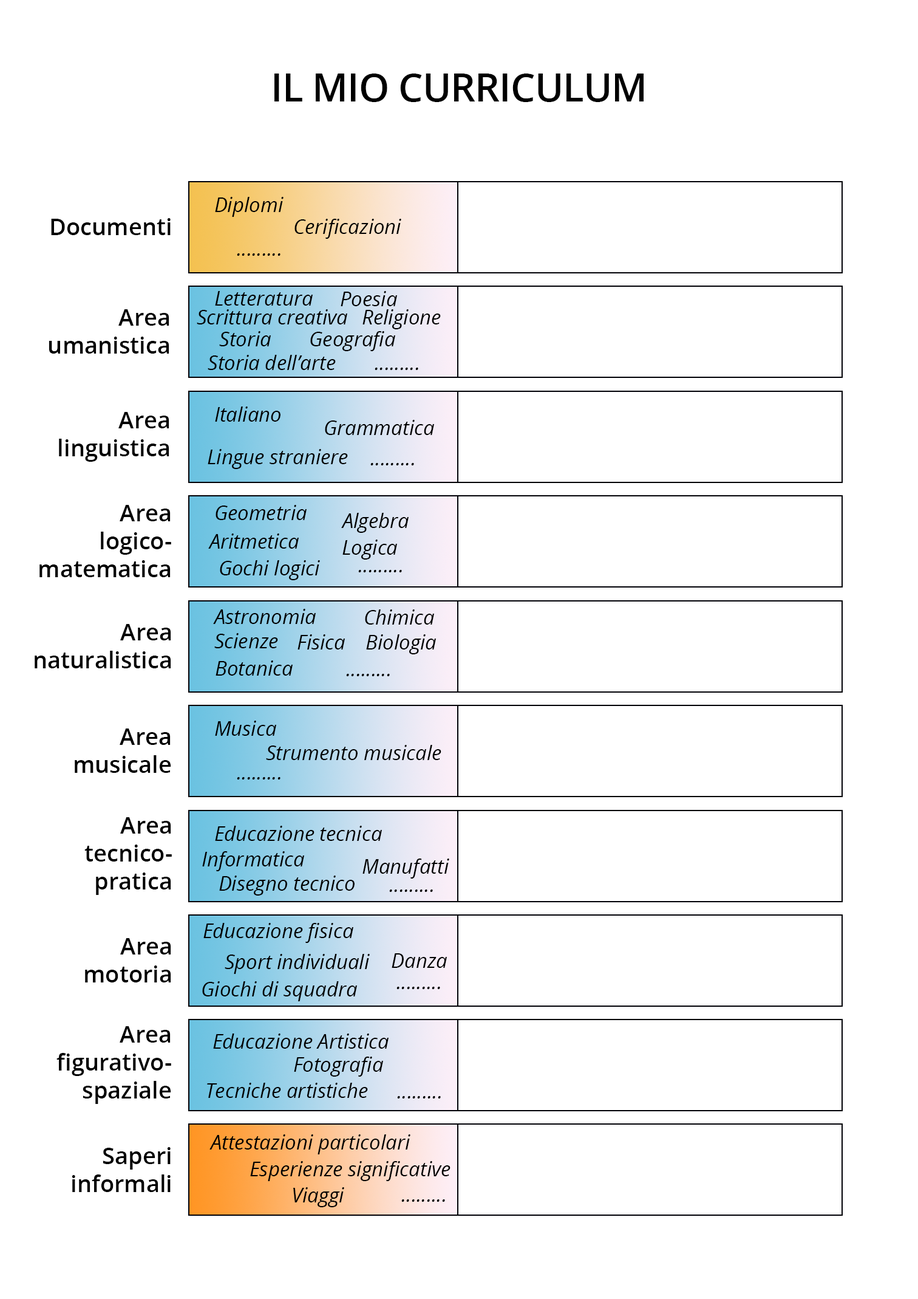
<style>
.page{position:relative;width:918px;height:1299px;background:#ffffff}
.page>*{position:absolute;margin:0}
.t1{font:38.6px "OpenSans-Semibold";letter-spacing:-0.01em;color:#000000}
.t2{font:20.1px "OpenSans-Italic";color:#000000}
.t3{font:23.1px "OpenSans-Semibold";color:#000000}
</style>
<div class="page">
<p class="t1" style="left:275px;top:73px;width:369px;height:29px">IL MIO CURRICULUM</p>
<p class="t2" style="left:215px;top:197px;width:69px;height:20px">Diplomi</p>
<p class="t3" style="left:51px;top:218px;width:120px;height:17px">Documenti</p>
<p class="t2" style="left:295px;top:219px;width:106px;height:20px">Cerificazioni</p>
<p class="t2" style="left:237px;top:253px;width:44px;height:3px">.........</p>
<p class="t2" style="left:215px;top:291px;width:98px;height:14px">Letteratura</p>
<p class="t2" style="left:341px;top:291px;width:56px;height:15px">Poesia</p>
<p class="t3" style="left:49px;top:309px;width:120px;height:44px;text-align:right">Area<br>umanistica</p>
<p class="t2" style="left:197px;top:309px;width:150px;height:15px">Scrittura creativa</p>
<p class="t2" style="left:363px;top:309px;width:78px;height:20px">Religione</p>
<p class="t2" style="left:219px;top:331px;width:52px;height:15px">Storia</p>
<p class="t2" style="left:310px;top:331px;width:85px;height:20px">Geografia</p>
<p class="t2" style="left:208px;top:355px;width:128px;height:15px">Storia dell’arte</p>
<p class="t2" style="left:375px;top:367px;width:43px;height:3px">.........</p>
<p class="t3" style="left:59px;top:412px;width:110px;height:50px;text-align:right">Area<br>linguistica</p>
<p class="t2" style="left:215px;top:406px;width:66px;height:15px">Italiano</p>
<p class="t2" style="left:325px;top:420px;width:109px;height:15px">Grammatica</p>
<p class="t2" style="left:208px;top:449px;width:140px;height:20px">Lingue straniere</p>
<p class="t2" style="left:370px;top:463px;width:44px;height:2px">.........</p>
<p class="t3" style="left:39px;top:505px;width:132px;height:72px;text-align:right">Area<br>logico-<br>matematica</p>
<p class="t2" style="left:216px;top:505px;width:91px;height:15px">Geometria</p>
<p class="t2" style="left:341px;top:513px;width:68px;height:20px">Algebra</p>
<p class="t2" style="left:208px;top:533px;width:91px;height:15px">Aritmetica</p>
<p class="t2" style="left:343px;top:539px;width:54px;height:20px">Logica</p>
<p class="t2" style="left:220px;top:560px;width:100px;height:20px">Gochi logici</p>
<p class="t2" style="left:358px;top:570px;width:44px;height:2px">.........</p>
<p class="t2" style="left:213px;top:609px;width:103px;height:15px">Astronomia</p>
<p class="t2" style="left:365px;top:609px;width:69px;height:15px">Chimica</p>
<p class="t3" style="left:35px;top:624px;width:136px;height:44px;text-align:right">Area<br>naturalistica</p>
<p class="t2" style="left:214px;top:633px;width:64px;height:15px">Scienze</p>
<p class="t2" style="left:298px;top:634px;width:47px;height:15px">Fisica</p>
<p class="t2" style="left:366px;top:634px;width:70px;height:20px">Biologia</p>
<p class="t2" style="left:216px;top:660px;width:77px;height:15px">Botanica</p>
<p class="t2" style="left:346px;top:674px;width:44px;height:2px">.........</p>
<p class="t2" style="left:215px;top:720px;width:61px;height:15px">Musica</p>
<p class="t3" style="left:75px;top:728px;width:96px;height:45px;text-align:right">Area<br>musicale</p>
<p class="t2" style="left:266px;top:745px;width:176px;height:15px">Strumento musicale</p>
<p class="t2" style="left:237px;top:777px;width:44px;height:2px">.........</p>
<p class="t3" style="left:84px;top:817px;width:88px;height:78px;text-align:right">Area<br>tecnico-<br>pratica</p>
<p class="t2" style="left:215px;top:825px;width:167px;height:16px">Educazione tecnica</p>
<p class="t2" style="left:202px;top:851px;width:102px;height:20px">Informatica</p>
<p class="t2" style="left:363px;top:858px;width:86px;height:20px">Manufatti</p>
<p class="t2" style="left:219px;top:875px;width:136px;height:20px">Disegno tecnico</p>
<p class="t2" style="left:389px;top:889px;width:44px;height:3px">.........</p>
<p class="t2" style="left:203px;top:923px;width:150px;height:20px">Educazione fisica</p>
<p class="t3" style="left:85px;top:938px;width:86px;height:44px;text-align:right">Area<br>motoria</p>
<p class="t2" style="left:225px;top:954px;width:145px;height:20px">Sport individuali</p>
<p class="t2" style="left:392px;top:953px;width:55px;height:15px">Danza</p>
<p class="t2" style="left:202px;top:981px;width:155px;height:20px">Giochi di squadra</p>
<p class="t2" style="left:397px;top:986px;width:43px;height:3px">.........</p>
<p class="t3" style="left:56px;top:1026px;width:115px;height:78px;text-align:right">Area<br>figurativo-<br>spaziale</p>
<p class="t2" style="left:213px;top:1033px;width:176px;height:15px">Educazione Artistica</p>
<p class="t2" style="left:294px;top:1056px;width:89px;height:20px">Fotografia</p>
<p class="t2" style="left:207px;top:1082px;width:161px;height:15px">Tecniche artistiche</p>
<p class="t2" style="left:397px;top:1096px;width:44px;height:2px">.........</p>
<p class="t2" style="left:210px;top:1134px;width:201px;height:20px">Attestazioni particolari</p>
<p class="t3" style="left:72px;top:1147px;width:99px;height:45px;text-align:right">Saperi<br>informali</p>
<p class="t2" style="left:250px;top:1161px;width:201px;height:20px">Esperienze significative</p>
<p class="t2" style="left:293px;top:1187px;width:51px;height:20px">Viaggi</p>
<p class="t2" style="left:401px;top:1199px;width:44px;height:2px">.........</p>
</div>
